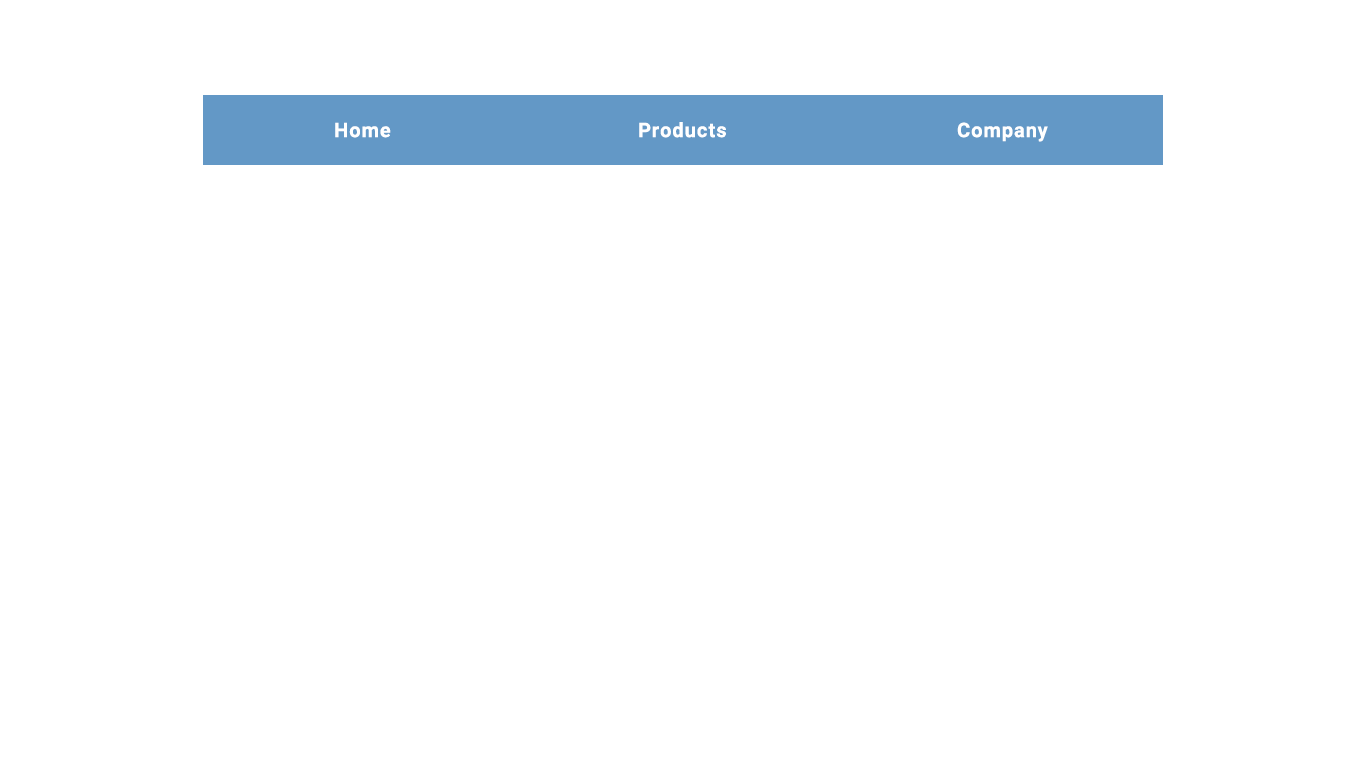
<style>
.page{position:relative;width:1366px;height:768px;background:#ffffff}
.page>*{position:absolute;margin:0}
.t1{font:20px "Roboto-Bold";letter-spacing:0.05em;color:#ffffff}
</style>
<div class="page">
<p class="t1" style="left:335px;top:122px;width:56px;height:16px">Home</p>
<p class="t1" style="left:639px;top:122px;width:87px;height:16px">Products</p>
<p class="t1" style="left:957px;top:122px;width:91px;height:20px">Company</p>
</div>
